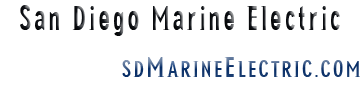
<style>
.page{position:relative;width:363px;height:97px;background:#ffffff}
.page>*{position:absolute;margin:0}
.t1{font:36px "NewGlobal";letter-spacing:0.1em;color:#111419;scale:0.86 1}
.t2{font:24px "NewGlobal";letter-spacing:0.1em}
.t3{font:30px "NewGlobal";letter-spacing:0.1em}
</style>
<div class="page">
<p class="t1" style="left:20px;top:5px;width:320px;height:31px">San Diego Marine Electric</p>
<p class="t2" style="left:122px;top:57px;width:238px;height:20px">SD<span class="t3">M</span>ARINE<span class="t3">E</span>LECTRIC.COM</p>
</div>
